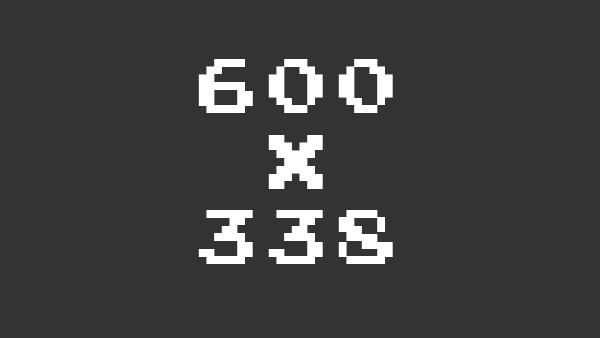
<style>
.page{position:relative;width:600px;height:338px;background:#333333}
.page>*{position:absolute;margin:0}
.t1{font:84.1px/75.1px "Joystix";color:#ffffff}
</style>
<div class="page">
<p class="t1" style="left:198px;top:59px;width:195px;height:205px;text-align:center">600<br>x<br>338</p>
</div>
